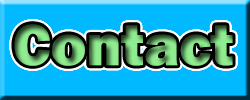
<style>
.page{position:relative;width:250px;height:100px;background:#00b9ff}
.page>*{position:absolute;margin:0}
.t1{font:60px "FranklinGothic-Heavy";color:#90ee90}
</style>
<div class="page">
<p class="t1" style="left:14px;top:24px;width:219px;height:42px">Contact</p>
</div>
